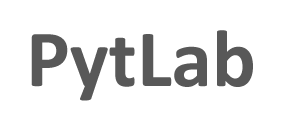
<style>
.page{position:relative;width:283px;height:125px;background:#ffffff}
.page>*{position:absolute;margin:0}
.t1{font:82px "Calibri-Bold";color:#585858}
</style>
<div class="page">
<p class="t1" style="left:31px;top:30px;width:222px;height:71px">PytLab</p>
</div>
